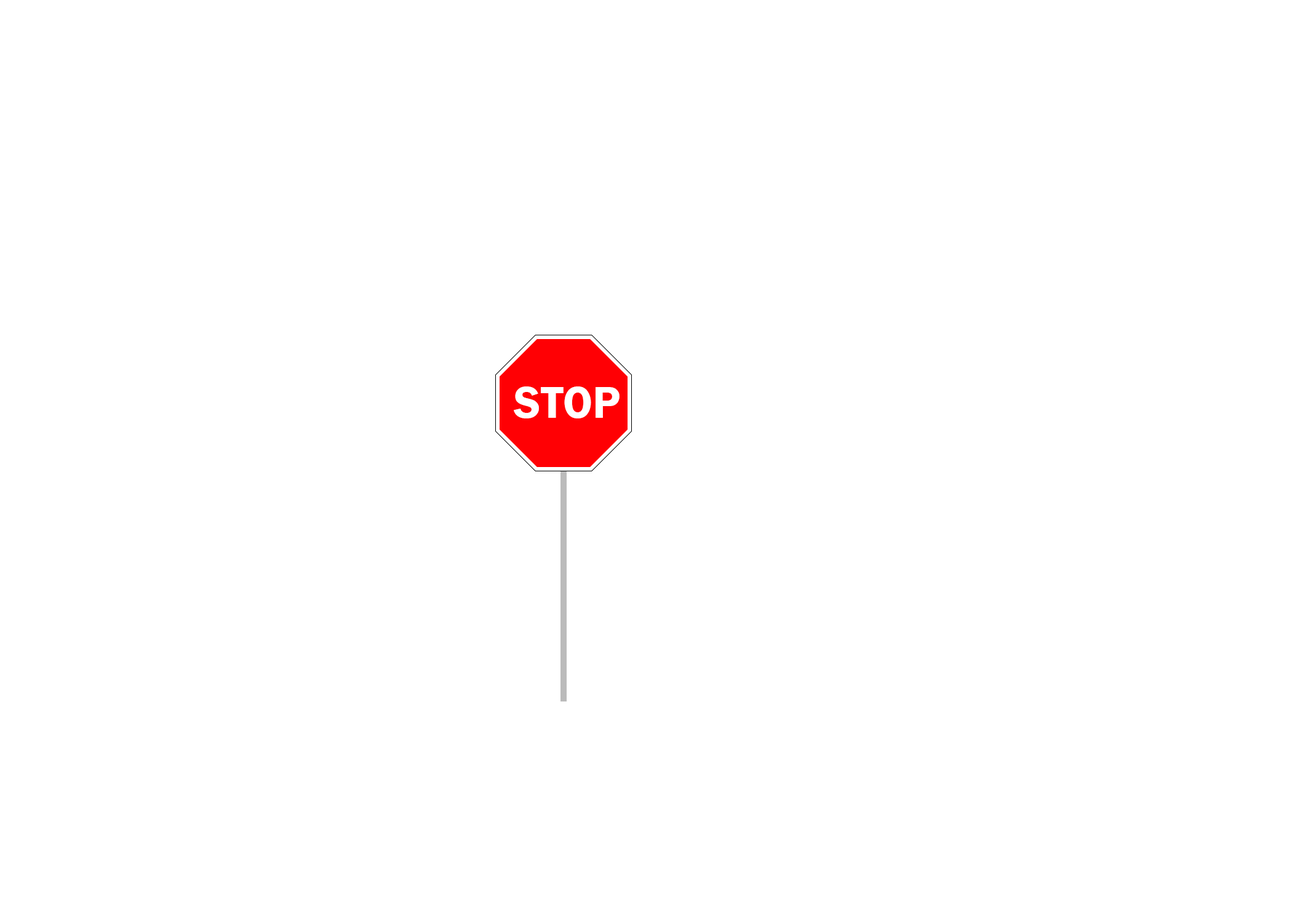
<style>
.page{position:relative;width:1292px;height:923px;background:#ffffff}
.page>*{position:absolute;margin:0}
.t1{font:46.1px "FranklinGothic-Demi";color:#ffffff}
</style>
<div class="page">
<p class="t1" style="left:514px;top:386px;width:106px;height:32px">STOP</p>
</div>
